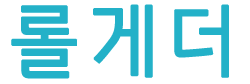
<style>
.page{position:relative;width:250px;height:84px;background:#ffffff}
.page>*{position:absolute;margin:0}
.t1{font:76.8px "GoyangIlsanR-Regular";letter-spacing:0.12em;color:#23b1c8;font-weight:bold}
</style>
<div class="page">
<p class="t1" style="left:11px;top:4px;width:218px;height:75px">롤게더</p>
</div>
